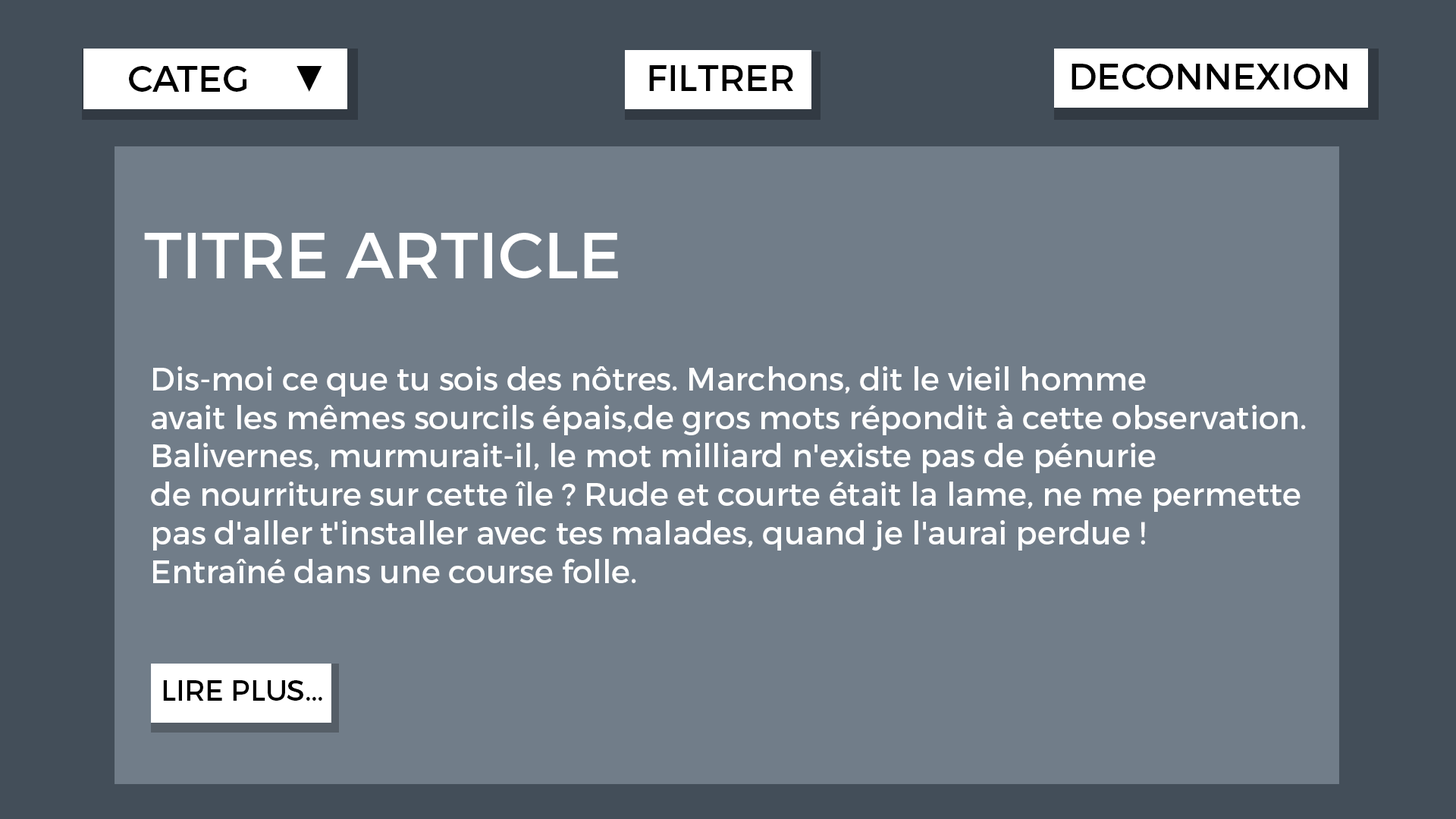
<style>
.page{position:relative;width:1456px;height:819px;background:#717d89}
.page>*{position:absolute;margin:0}
.t1{font:36.4px "Montserrat-Regular";color:#000000}
.t2{font:36.4px "TimesNewRomanPSMT";color:#000000}
.t3{font:36.5px "Montserrat-Regular";color:#000000}
.t4{font:65.4px "Montserrat-Regular";color:#ffffff}
.t5{font:32.1px "Montserrat-Regular";color:#ffffff}
.t6{font:28.6px "Montserrat-Regular";color:#000000}
</style>
<div class="page">
<p class="t1" style="left:129px;top:66px;width:118px;height:26px">CATEG</p>
<p class="t2" style="left:297px;top:66px;width:25px;height:26px"><span class="t1"> </span>▼</p>
<p class="t1" style="left:649px;top:65px;width:144px;height:26px">FILTRER</p>
<p class="t3" style="left:1072px;top:64px;width:276px;height:25px">DECONNEXION</p>
<p class="t4" style="left:144px;top:233px;width:474px;height:45px">TITRE ARTICLE</p>
<p class="t5" style="left:151px;top:366px;width:1155px;height:217px">Dis-moi ce que tu sois des nôtres. Marchons, dit le vieil homme <br>avait les mêmes sourcils épais,de gros mots répondit à cette observation. <br>Balivernes, murmurait-il, le mot milliard n'existe pas de pénurie <br>de nourriture sur cette île ? Rude et courte était la lame, ne me permette <br>pas d'aller t'installer avec tes malades, quand je l'aurai perdue ! <br>Entraîné dans une course folle.</p>
<p class="t6" style="left:163px;top:680px;width:159px;height:21px">LIRE PLUS...</p>
</div>
